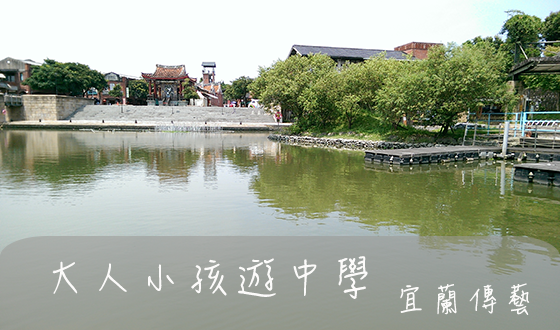
<style>
.page{position:relative;width:560px;height:330px}
.page>*{position:absolute;margin:0}
.t1{font:48px "DFHsiu-W3-WIN-BF";color:#fcfbfa}
.t2{font:36px "DFHsiu-W3-WIN-BF";color:#fcfbfa}
</style>
<div class="page">
<p class="t1" style="left:52px;top:256px;width:316px;height:43px">大人小孩遊中學</p>
<p class="t2" style="left:400px;top:283px;width:130px;height:32px">宜蘭傳藝</p>
</div>
